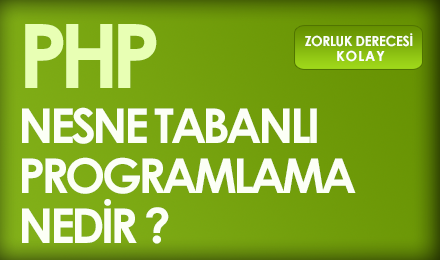
<style>
.page{position:relative;width:440px;height:260px}
.page>*{position:absolute;margin:0}
.t1{font:89px "CenturyGothic-Bold";letter-spacing:-0.1em;color:#e8ffb4;text-transform:uppercase}
.t2{font:14px "CenturyGothic-Bold";letter-spacing:-0.04em;color:#fcfff6;text-transform:uppercase}
.t3{font:14px "CenturyGothic-Bold";letter-spacing:0.06em;color:#ffffff;text-transform:uppercase}
.t4{font:48px/50px "CenturyGothic-Bold";letter-spacing:-0.08em;color:#fcfff6;text-transform:uppercase}
</style>
<div class="page">
<p class="t1" style="left:25px;top:24px;width:132px;height:64px">php</p>
<p class="t2" style="left:305px;top:33px;width:108px;height:14px">zorluk Derecesİ</p>
<p class="t3" style="left:337px;top:50px;width:48px;height:12px">KOLAY</p>
<p class="t4" style="left:22px;top:107px;width:334px;height:137px">nesne tabanlı<br>programlama<br>nedİr ?</p>
</div>
